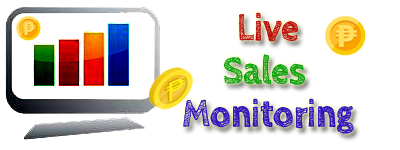
<style>
.page{position:relative;width:400px;height:150px;background:#ffffff}
.page>*{position:absolute;margin:0}
.t1{font:39.6px "CabinSketch-Bold";letter-spacing:-0.005em;color:#2609bc;scale:0.91 1}
.t2{font:39.6px "CabinSketch-Bold";letter-spacing:-0.005em;color:#ba0404;scale:0.91 1}
.t3{font:39.6px "CabinSketch-Bold";letter-spacing:-0.005em;color:#039f07;scale:0.91 1}
</style>
<div class="page">
<p class="t1" style="left:183px;top:12px;width:171px;height:122px;text-align:center"><span class="t2">Live<br></span><span class="t3">Sales <br></span>Monitoring</p>
</div>
